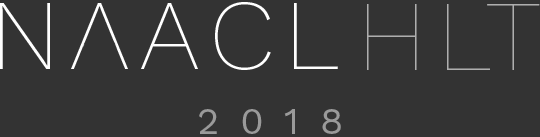
<style>
.page{position:relative;width:540px;height:137px;background:#333333}
.page>*{position:absolute;margin:0}
.t1{font:100px "WorkSans-ExtraLight";letter-spacing:0.1em;color:#ffffff}
.t2{font:100px "WorkSans-Thin";letter-spacing:0.1em;color:#aeaeae}
.t3{font:38px "WorkSans-Regular";letter-spacing:0.1em;color:#9a9a9a}
</style>
<div class="page">
<p class="t1" style="left:0px;top:2px;width:338px;height:68px">NAACL</p>
<p class="t2" style="left:367px;top:4px;width:173px;height:66px">HLT</p>
<p class="t3" style="left:199px;top:109px;width:142px;height:25px">2 0 1 8</p>
</div>
